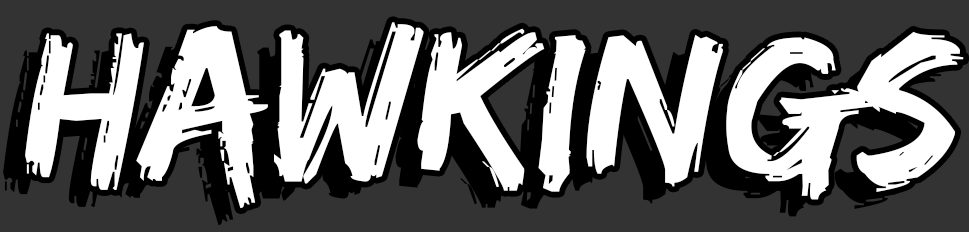
<style>
.page{position:relative;width:969px;height:232px;background:#333333}
.page>*{position:absolute;margin:0}
.t1{font:219.5px "Edo";color:#ffffff}
</style>
<div class="page">
<p class="t1" style="left:25px;top:22px;width:939px;height:187px">Hawkings<br>v</p>
</div>
